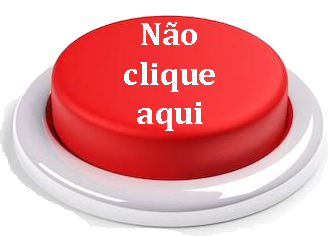
<style>
.page{position:relative;width:329px;height:236px;background:#ffffff}
.page>*{position:absolute;margin:0}
.t1{font:33px "Cambria-Bold";color:#ffffff}
</style>
<div class="page">
<p class="t1" style="left:124px;top:22px;width:91px;height:109px;text-align:center">Não<br>clique<br>aqui</p>
</div>
